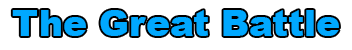
<style>
.page{position:relative;width:352px;height:50px;background:#ffffff}
.page>*{position:absolute;margin:0}
.t1{font:36px "Arial-Black";color:#00a8ff}
</style>
<div class="page">
<p class="t1" style="left:12px;top:10px;width:327px;height:26px">The Great Battle</p>
</div>
